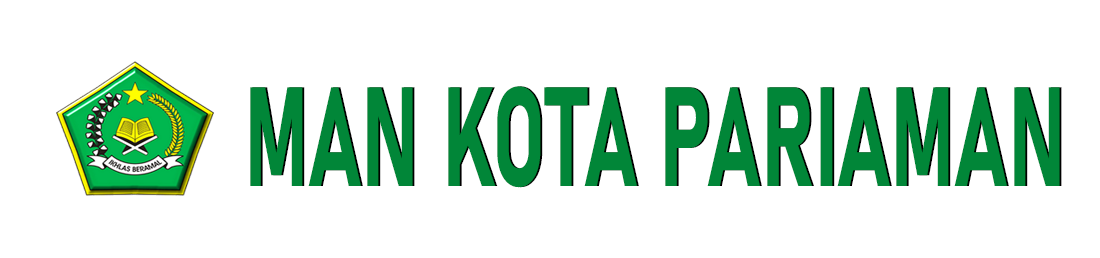
<style>
.page{position:relative;width:1100px;height:258px;background:#ffffff}
.page>*{position:absolute;margin:0}
.t1{font:138.7px "Bahnschrift-Bold";color:#018638;font-style:italic;scale:0.6 1}
</style>
<div class="page">
<p class="t1" style="left:250px;top:86px;width:810px;height:102px">MAN KOTA PARIAMAN</p>
<p class="t1" style="left:252px;top:86px;width:810px;height:102px">MAN KOTA PARIAMAN</p>
</div>
